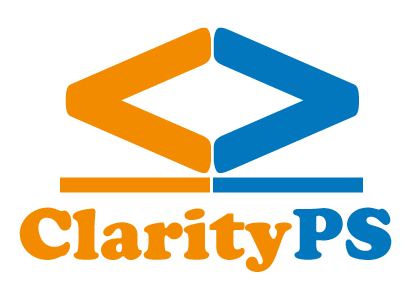
<style>
.page{position:relative;width:409px;height:300px;background:#ffffff}
.page>*{position:absolute;margin:0}
.t1{font:299.9px "CooperBlackStd";color:#f38b00}
.t2{font:299.9px "CooperBlackStd";color:#0277bd}
.t3{font:72px "CooperBlackStd";color:#f38b00}
.t4{font:72px "CooperBlackStd";color:#0277bd}
</style>
<div class="page">
<p class="t1" style="left:65px;top:27px;width:146px;height:146px">&lt;</p>
<p class="t2" style="left:213px;top:27px;width:146px;height:146px">&gt;</p>
<p class="t1" style="left:60px;top:177px;width:150px;height:16px">_</p>
<p class="t2" style="left:213px;top:177px;width:150px;height:16px">_</p>
<p class="t3" style="left:19px;top:207px;width:373px;height:65px">Clarity<span class="t4">PS</span></p>
</div>
